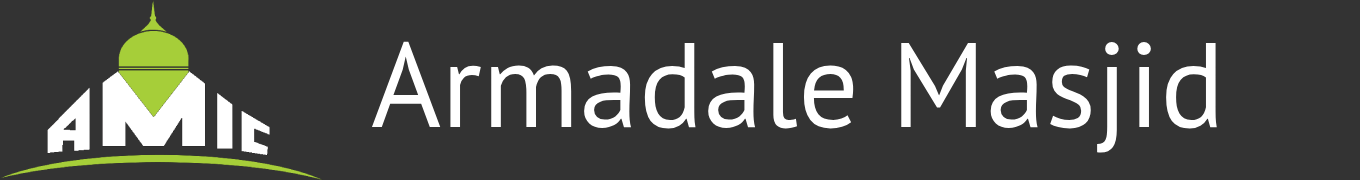
<style>
.page{position:relative;width:1360px;height:180px;background:#333333}
.page>*{position:absolute;margin:0}
.t1{font:120px "PTSans-Regular";color:#ffffff}
</style>
<div class="page">
<p class="t1" style="left:371px;top:41px;width:846px;height:112px">Armadale Masjid</p>
</div>
